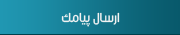
<style>
.page{position:relative;width:180px;height:35px}
.page>*{position:absolute;margin:0}
.t1{font:14px "Mj_Flow";letter-spacing:-0.001em;color:#f1f2f2}
</style>
<div class="page">
<p class="t1" style="left:61px;top:12px;width:59px;height:15px">ارسال پیامک</p>
</div>
